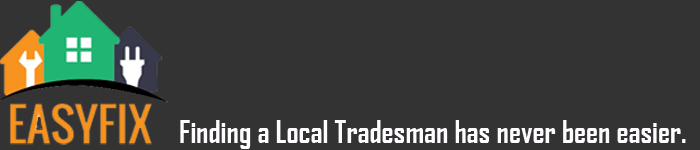
<style>
.page{position:relative;width:700px;height:150px;background:#333333}
.page>*{position:absolute;margin:0}
.t1{font:30px "AgencyFB-Bold";color:#fefcfe}
</style>
<div class="page">
<p class="t1" style="left:180px;top:120px;width:506px;height:29px">Finding a Local Tradesman has never been easier.</p>
</div>
